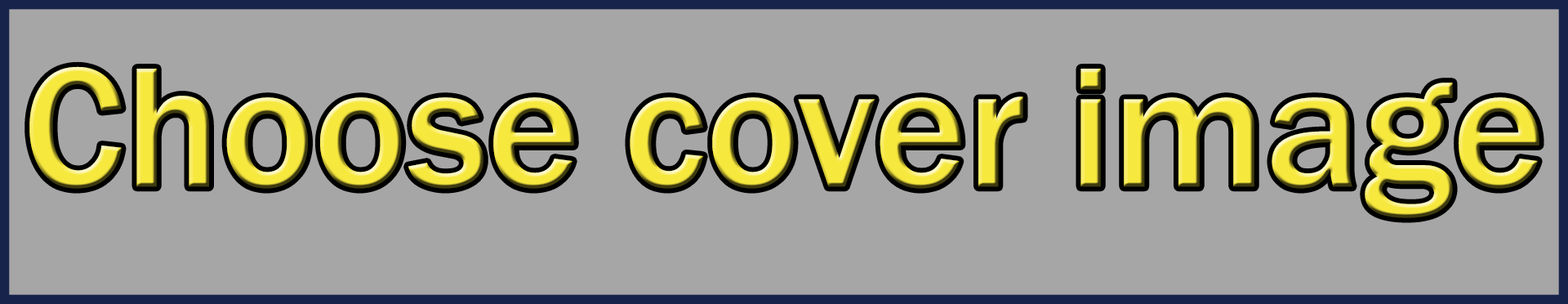
<style>
.page{position:relative;width:1568px;height:304px;background:#a7a6a6}
.page>*{position:absolute;margin:0}
.t1{font:176.4px "FranklinGothic-Medium";color:#f7e83e}
</style>
<div class="page">
<p class="t1" style="left:29px;top:66px;width:1510px;height:152px">Choose cover image</p>
</div>
